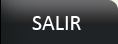
<style>
.page{position:relative;width:118px;height:44px;background:#1f2326}
.page>*{position:absolute;margin:0}
.t1{font:22px "Calibri";color:#ffffff}
</style>
<div class="page">
<p class="t1" style="left:32px;top:16px;width:49px;height:14px">SALIR</p>
</div>
